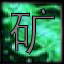
<style>
.page{position:relative;width:64px;height:64px}
.page>*{position:absolute;margin:0}
.t1{font:12px "AdobeHeitiStd-Regular"}
</style>
<div class="page">
<p class="t1" style="left:9px;top:8px;width:46px;height:47px">矿</p>
</div>
